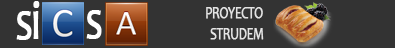
<style>
.page{position:relative;width:395px;height:48px;background:#333333}
.page>*{position:absolute;margin:0}
.t1{font:55.6px "Candara";letter-spacing:-0.04em;color:#fefefe;font-weight:bold;scale:0.74 1}
.t2{font:55.6px "Candara";letter-spacing:-0.04em;color:#ffffff;font-weight:bold;scale:0.74 1}
.t3{font:17px "Candara";letter-spacing:-0.04em;color:#e3e3e3;font-weight:bold;scale:0.74 1}
.t4{font:17px "Candara";letter-spacing:-0.04em;color:#e4e4e4;font-weight:bold;scale:0.74 1}
</style>
<div class="page">
<p class="t1" style="left:16px;top:1px;width:24px;height:39px">si</p>
<p class="t2" style="left:86px;top:10px;width:16px;height:29px">s</p>
<p class="t3" style="left:206px;top:7px;width:57px;height:12px">PROYECTO</p>
<p class="t4" style="left:210px;top:28px;width:54px;height:12px">STRUDEM</p>
</div>
